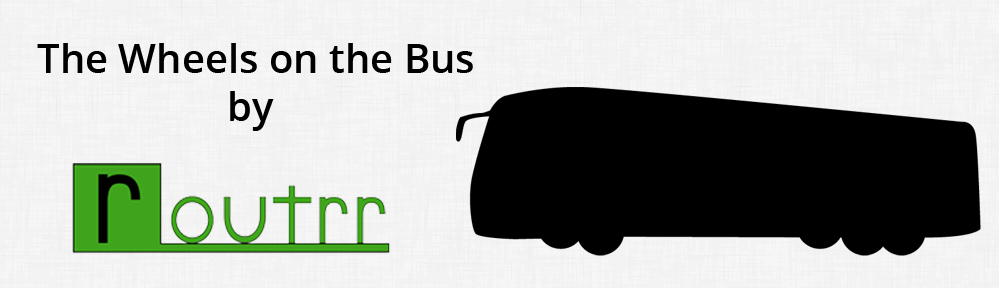
<style>
.page{position:relative;width:1000px;height:288px;background:#f3f3f3}
.page>*{position:absolute;margin:0}
.t1{font:40px "OpenSans-Semibold";color:#000000}
</style>
<div class="page">
<p class="t1" style="left:37px;top:43px;width:436px;height:88px">The Wheels on the Bus<br>      by</p>
</div>
